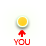
<style>
.page{position:relative;width:46px;height:46px;background:#ffffff}
.page>*{position:absolute;margin:0}
.t1{font:7.2px "Lato-Thin";letter-spacing:-0.025em;color:#ff0000;font-weight:bold;scale:1.11 1}
</style>
<div class="page">
<p class="t1" style="left:13px;top:39px;width:17px;height:6px">YOU</p>
</div>
